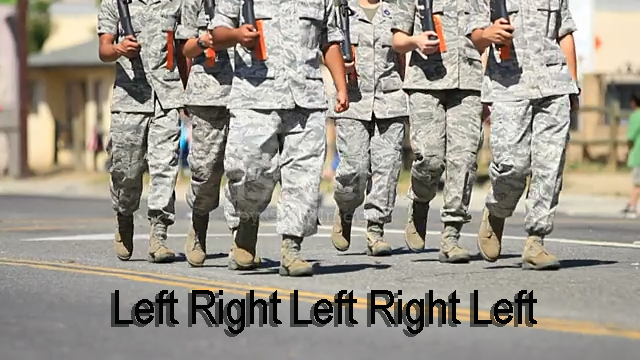
<style>
.page{position:relative;width:640px;height:360px}
.page>*{position:absolute;margin:0}
.t1{font:48px "ArialNarrow";color:#030303}
</style>
<div class="page">
<p class="t1" style="left:115px;top:290px;width:422px;height:44px">Left Right Left Right Left</p>
</div>
